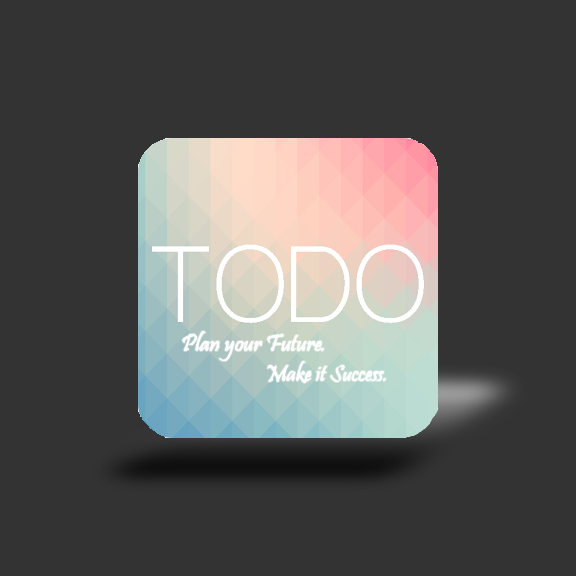
<style>
.page{position:relative;width:576px;height:576px;background:#333333}
.page>*{position:absolute;margin:0}
.t1{font:25px "Pristina-Regular";color:#fcfcfc}
.t2{font:24px "Pristina-Regular";color:#fcfcfc}
.t3{font:24px "Pristina-Regular";color:#fcfcfc;scale:0.97 1}
</style>
<div class="page">
<p class="t1" style="left:182px;top:331px;width:142px;height:30px">Plan your Future<span class="t2">.</span></p>
<p class="t3" style="left:267px;top:361px;width:119px;height:22px">Make it Success.</p>
</div>
